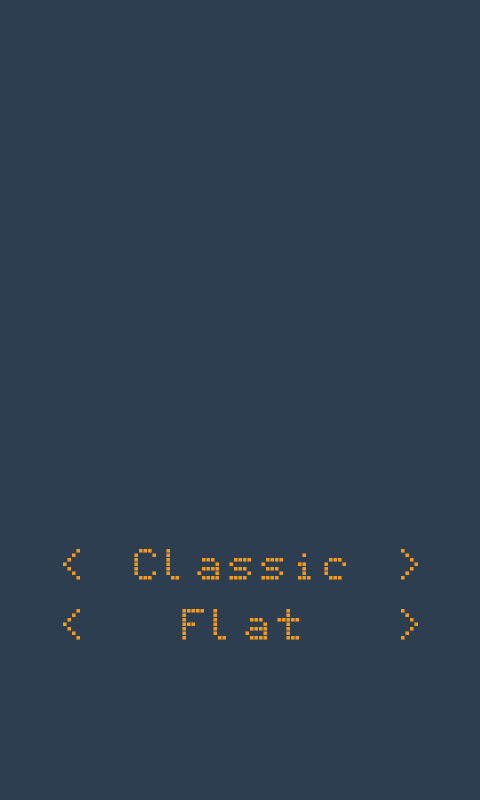
<style>
.page{position:relative;width:480px;height:800px;background:#2c3e50}
.page>*{position:absolute;margin:0}
.t1{font:36px "Erbos-Draco-1st-Open-NBP";color:#f39c12}
</style>
<div class="page">
<p class="t1" style="left:63px;top:549px;width:17px;height:31px">&lt;</p>
<p class="t1" style="left:134px;top:549px;width:212px;height:31px">Classic</p>
<p class="t1" style="left:401px;top:549px;width:17px;height:31px">&gt;</p>
<p class="t1" style="left:63px;top:609px;width:17px;height:31px">&lt;</p>
<p class="t1" style="left:182px;top:609px;width:117px;height:31px">Flat</p>
<p class="t1" style="left:401px;top:609px;width:17px;height:31px">&gt;</p>
</div>
